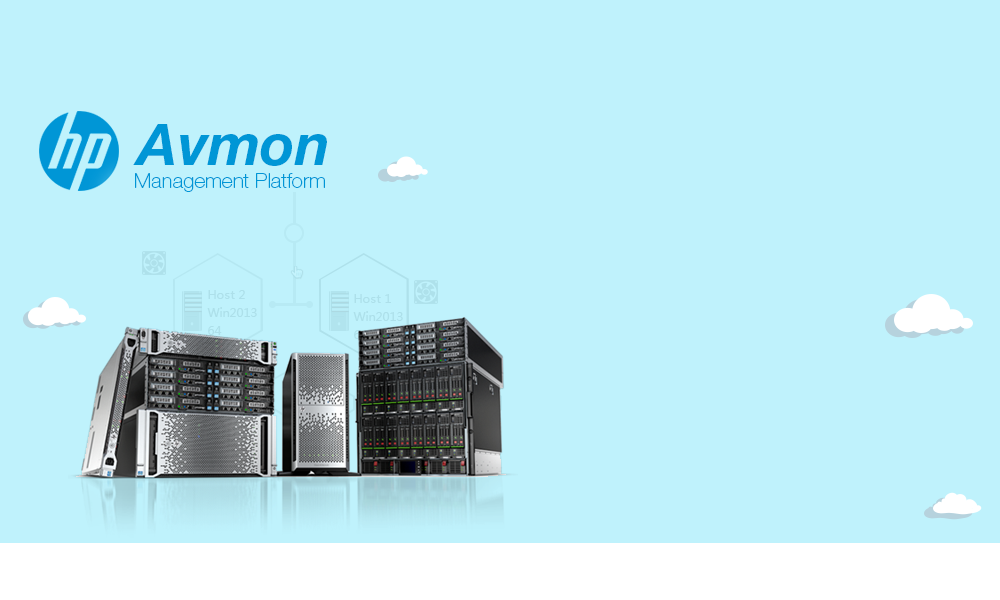
<style>
.page{position:relative;width:1000px;height:600px;background:#bff2fc}
.page>*{position:absolute;margin:0}
.t1{font:58px "HelveticaNeue-BoldItalic";color:#0096d6}
.t2{font:21px "HelveticaNeue-Thin";color:#0096d6}
.t3{font:12px/18px "MicrosoftYaHei";color:#ade0ea}
</style>
<div class="page">
<p class="t1" style="left:133px;top:124px;width:194px;height:42px">Avmon</p>
<p class="t2" style="left:135px;top:173px;width:190px;height:19px">Management Platform</p>
<p class="t3" style="left:207px;top:290px;width:50px;height:45px">Host 2<br>Win2013<br>64</p>
</div>
